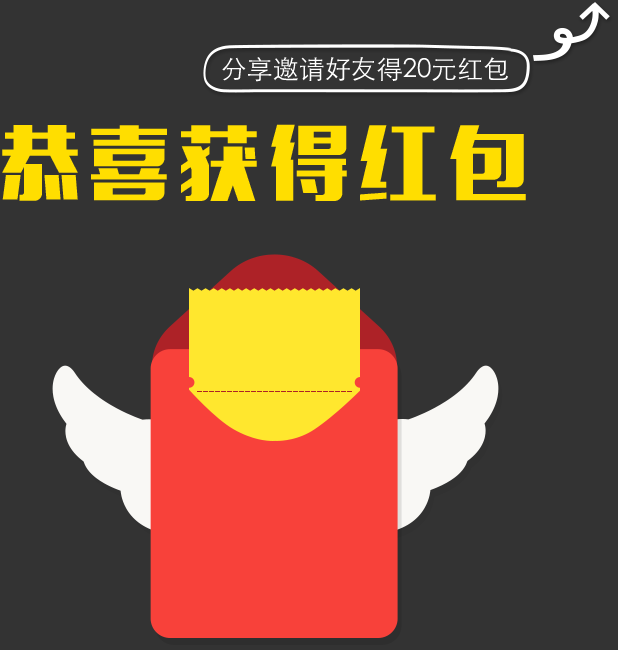
<style>
.page{position:relative;width:618px;height:650px;background:#333333}
.page>*{position:absolute;margin:0}
.t1{font:26px "STHeitiSC-Light";color:#ffffff}
.t2{font:80px "MFLiHei_Noncommercial-Regular";letter-spacing:0.12em;color:#ffde00}
</style>
<div class="page">
<p class="t1" style="left:222px;top:57px;width:286px;height:25px">分享邀请好友得20元红包</p>
<p class="t2" style="left:2px;top:124px;width:524px;height:77px">恭喜获得红包</p>
</div>
